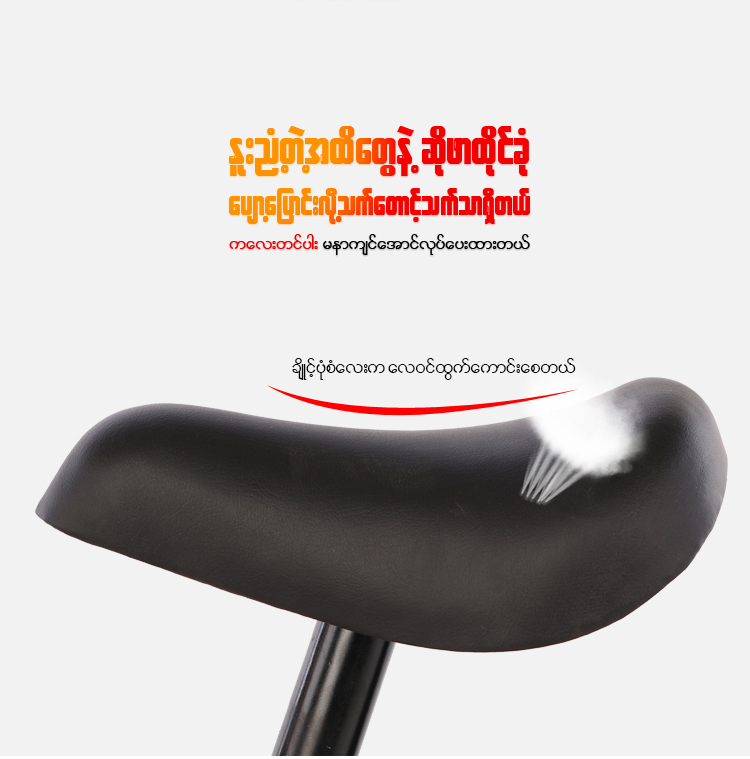
<style>
.page{position:relative;width:750px;height:759px;background:#f2f2f2}
.page>*{position:absolute;margin:0}
.t1{font:50.1px "W30ArtHouse"}
.t2{font:36.3px "W30ArtHouse"}
.t3{font:23.2px "W01ArtHouseWin";color:#000000}
.t4{font:24.5px "W01ArtHouseWin";color:#000000}
</style>
<div class="page">
<p class="t1" style="left:229px;top:126px;width:300px;height:50px">El;nHUwYJtxdawGeJY qdkzmxdkifcHk</p>
<p class="t2" style="left:229px;top:188px;width:301px;height:36px">aysmYajymif;vdkYoufawmifhoufom&amp;Sdw,f</p>
<p class="t3" style="left:229px;top:234px;width:301px;height:21px">uav;wifyg;  remusifatmifvkyfay;xm;w,f</p>
<p class="t4" style="left:292px;top:358px;width:284px;height:22px">csdKifhyHkpHav;u av0ifxGufaumif;apw,f</p>
</div>
